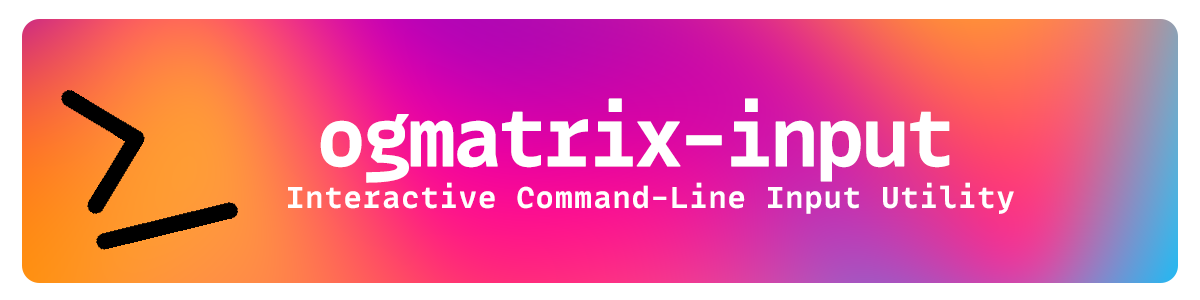
<style>
.page{position:relative;width:1200px;height:300px}
.page>*{position:absolute;margin:0}
.t1{font:80px "MonoLisa-Bold";letter-spacing:-0.1em;color:#ffffff;font-weight:bold}
.t2{font:30px "MonoLisa-Bold";color:#ffffff}
</style>
<div class="page">
<p class="t1" style="left:320px;top:98px;width:630px;height:85px">ogmatrix-input</p>
<p class="t2" style="left:288px;top:182px;width:726px;height:32px">Interactive Command-Line Input Utility</p>
</div>
